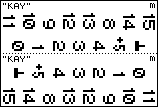
<style>
.page{position:relative;width:158px;height:107px;background:#ffffff}
.page>*{position:absolute;margin:0}
.t1{font:8px "ZX 6x8";color:#000000}
</style>
<div class="page">
<p class="t1" style="left:3px;top:3px;width:27px;height:6px">"KAY"</p>
<p class="t1" style="left:3px;top:56px;width:27px;height:6px">"KAY"</p>
</div>
